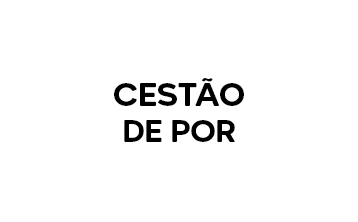
<style>
.page{position:relative;width:358px;height:222px;background:#ffffff}
.page>*{position:absolute;margin:0}
.t1{font:30px "AftikaSoft-Bold";letter-spacing:-0.025em;color:#000000}
</style>
<div class="page">
<p class="t1" style="left:124px;top:120px;width:111px;height:22px">DE POR</p>
</div>
